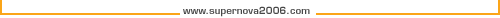
<style>
.page{position:relative;width:500px;height:18px;background:#ffffff}
.page>*{position:absolute;margin:0}
.t1{font:9.5px "Eurostile-Demi";letter-spacing:0.02em;color:#484848}
</style>
<div class="page">
<p class="t1" style="left:183px;top:6px;width:127px;height:11px">www.supernova2006.com</p>
</div>
